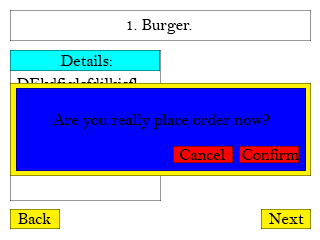
<style>
.page{position:relative;width:320px;height:240px;background:#ffffff}
.page>*{position:absolute;margin:0}
.t1{font:16.7px "BellMT";color:#000000}
.t2{font:16.7px "BellMT"}
</style>
<div class="page">
<p class="t1" style="left:127px;top:19px;width:65px;height:15px">1. Burger.</p>
<p class="t1" style="left:60px;top:55px;width:52px;height:11px">Details:</p>
<p class="t2" style="left:16px;top:78px;width:122px;height:15px">DEkdfjglsfdjlkjsfl</p>
<p class="t1" style="left:53px;top:114px;width:217px;height:15px">Are you really place order now?</p>
<p class="t1" style="left:180px;top:149px;width:119px;height:11px">Cancel    Confirm</p>
<p class="t1" style="left:18px;top:213px;width:33px;height:11px">Back</p>
<p class="t1" style="left:268px;top:213px;width:36px;height:11px">Next</p>
</div>
